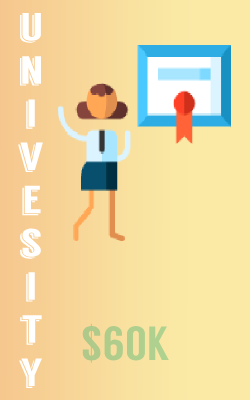
<style>
.page{position:relative;width:250px;height:400px;background:#faeaa6}
.page>*{position:absolute;margin:0}
.t1{font:39.3px "Langdon";color:#ffffff;scale:1.27 1}
.t2{font:48px "Langdon";color:#afce8d}
</style>
<div class="page">
<p class="t1" style="left:18px;top:13px;width:25px;height:375px;text-align:center">u<br>n<br>i<br>v<br>e<br>s<br>i<br>t<br>y</p>
<p class="t2" style="left:82px;top:323px;width:87px;height:40px">$60K</p>
</div>
